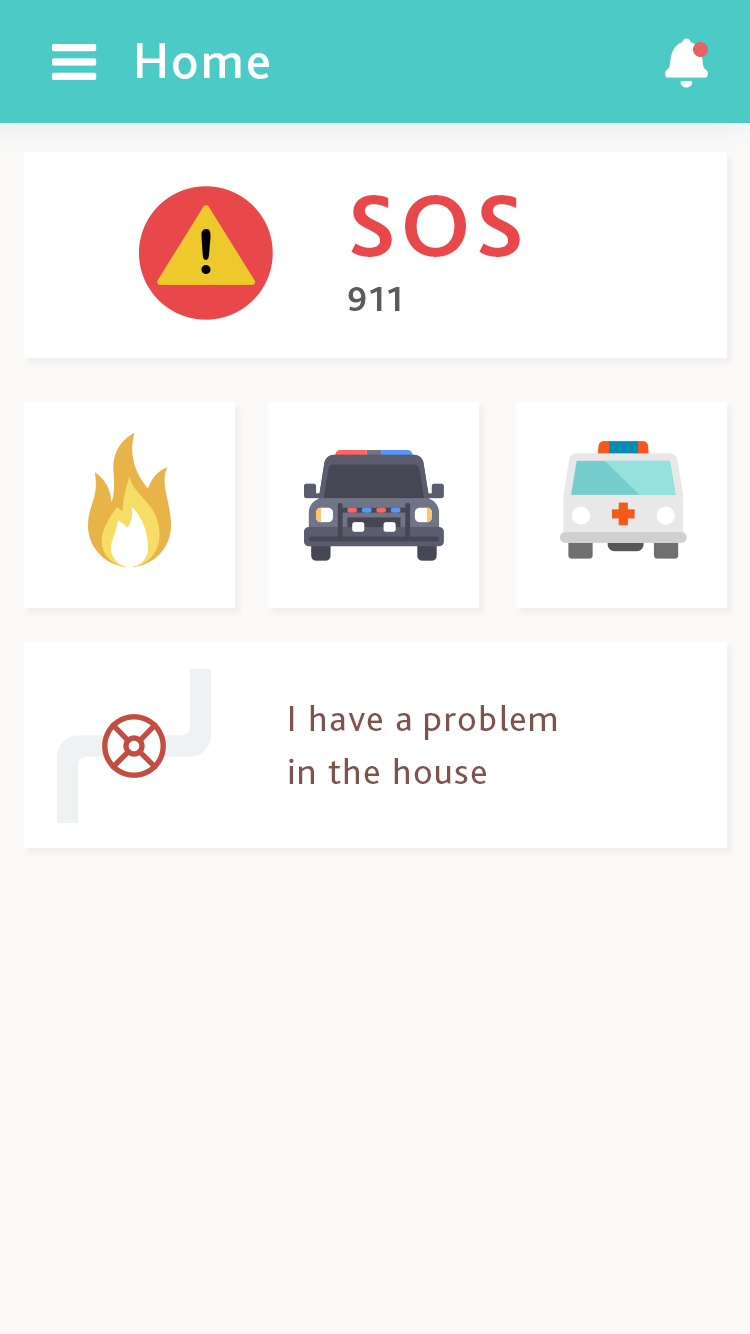
<style>
.page{position:relative;width:750px;height:1334px;background:#fbfaf9}
.page>*{position:absolute;margin:0}
.t1{font:51.7px "BlissPro-Medium";letter-spacing:0.04em;color:#ffffff}
.t2{font:92.5px/217.1px "BlissPro-Bold";letter-spacing:0.04em;color:#e84849}
.t3{font:36.5px/55.1px "BlissPro-Bold";letter-spacing:0.04em;color:#5c5c5c}
.t4{font:37.1px/52.6px "BlissPro";letter-spacing:0.04em;color:#7f524d}
</style>
<div class="page">
<p class="t1" style="left:137px;top:43px;width:132px;height:36px">Home</p>
<p class="t2" style="left:348px;top:195px;width:172px;height:116px">SOS<br><span class="t3">911</span></p>
<p class="t4" style="left:289px;top:705px;width:267px;height:79px">I have a problem <br>in the house</p>
</div>
